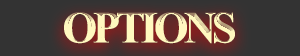
<style>
.page{position:relative;width:300px;height:56px;background:#333333}
.page>*{position:absolute;margin:0}
.t1{font:44.5px "TimesNewRomanPS-BoldMT";letter-spacing:-0.1em;color:#fff8bf}
</style>
<div class="page">
<p class="t1" style="left:64px;top:12px;width:171px;height:32px">OPTIONS</p>
</div>
